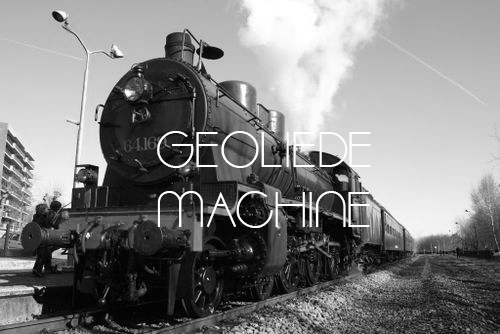
<style>
.page{position:relative;width:500px;height:334px}
.page>*{position:absolute;margin:0}
.t1{font:50px "Moonbeam";color:#ffffff}
</style>
<div class="page">
<p class="t1" style="left:157px;top:131px;width:214px;height:97px">GEOLIEDE<br>MACHINE</p>
</div>
